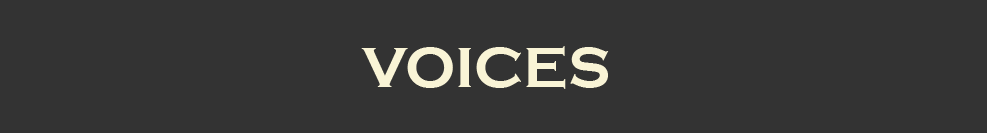
<style>
.page{position:relative;width:987px;height:133px;background:#333333}
.page>*{position:absolute;margin:0}
.t1{font:58.6px "CopperplateGothic-Bold";color:#f9f4d6;text-transform:uppercase}
</style>
<div class="page">
<p class="t1" style="left:361px;top:46px;width:248px;height:43px">Voices</p>
</div>
